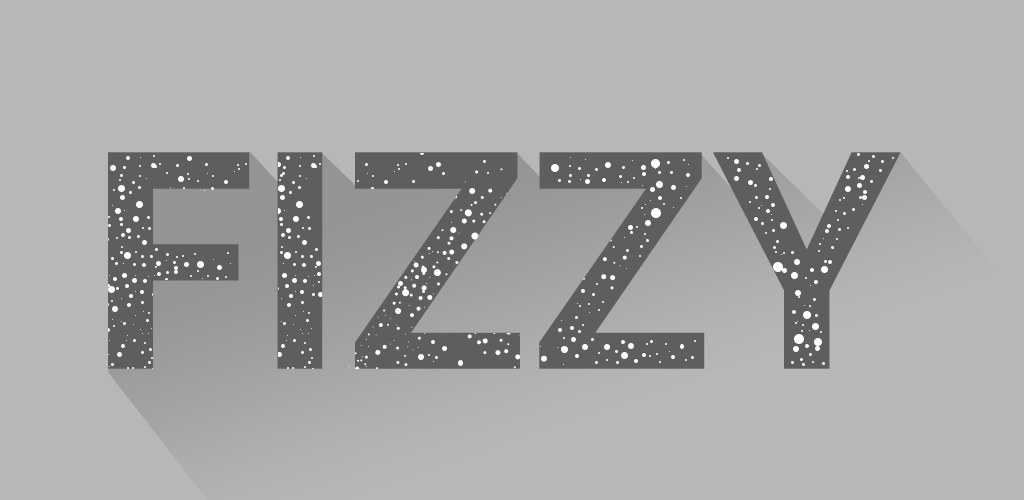
<style>
.page{position:relative;width:1024px;height:500px;background:#b7b7b7}
.page>*{position:absolute;margin:0}
.t1{font:304.2px "Roboto-Bold";color:#5e5e5e;text-transform:uppercase}
</style>
<div class="page">
<p class="t1" style="left:108px;top:152px;width:793px;height:217px">Fizzy</p>
</div>
